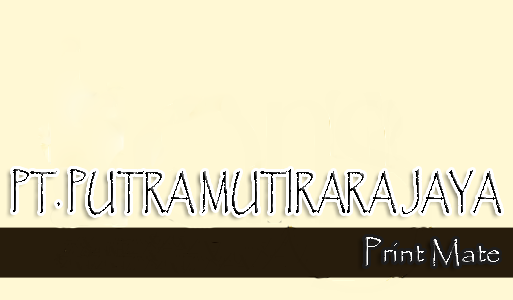
<style>
.page{position:relative;width:513px;height:300px;background:#fff8d4}
.page>*{position:absolute;margin:0}
.t1{font:44.5px "Papyrus-Regular";color:#000000;scale:0.65 1}
.t2{font:30px "Papyrus-Regular"}
</style>
<div class="page">
<p class="t1" style="left:13px;top:169px;width:488px;height:46px">PT. PUTRA MUTIRARA JAYA</p>
<p class="t2" style="left:365px;top:237px;width:134px;height:29px">Print Mate</p>
</div>
